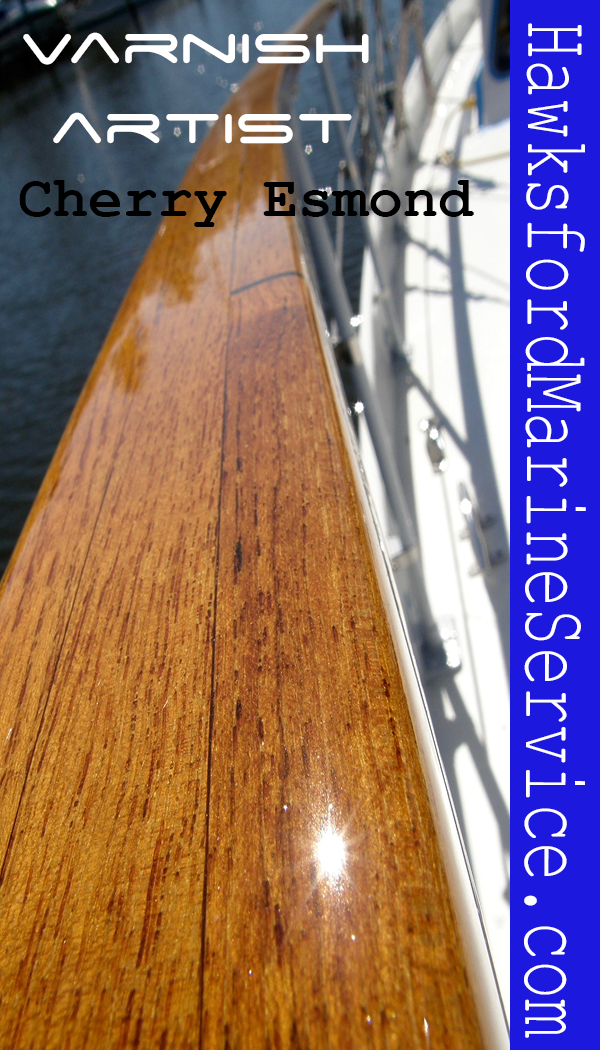
<style>
.page{position:relative;width:600px;height:1050px}
.page>*{position:absolute;margin:0}
.t1{font:93.2px "CourierNewPSMT";color:#ffffff;scale:0.7 1}
.t2{font:66.7px "SpaceAge";color:#ffffff}
.t3{font:58.4px "CourierNewPS-BoldMT";color:#000000}
</style>
<div class="page">
<p class="t1" style="left:524px;top:23px;width:62px;height:1015px;rotate:90deg">HawksfordMarineService.com</p>
<p class="t2" style="left:23px;top:32px;width:346px;height:112px">Varnish <br> artist</p>
<p class="t3" style="left:19px;top:180px;width:455px;height:47px">Cherry Esmond</p>
</div>
